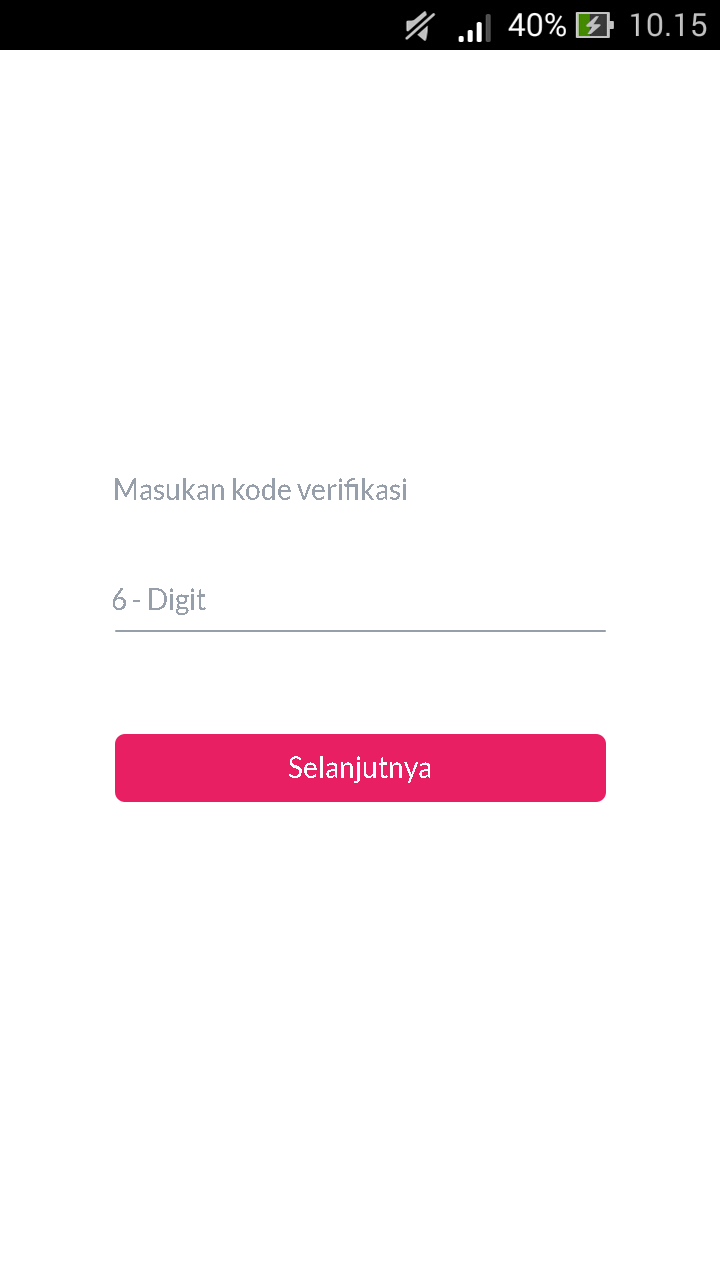
<style>
.page{position:relative;width:720px;height:1280px;background:#ffffff}
.page>*{position:absolute;margin:0}
.t1{font:29.1px "Lato-Regular";color:#969faa;scale:0.96 1}
.t2{font:29.2px "Lato-Regular";color:#969faa;scale:0.96 1}
.t3{font:29.2px "Lato-Regular";color:#ffffff;scale:0.96 1}
</style>
<div class="page">
<p class="t1" style="left:115px;top:478px;width:291px;height:22px">Masukan kode verifikasi</p>
<p class="t2" style="left:113px;top:588px;width:93px;height:27px">6 - Digit</p>
<p class="t3" style="left:289px;top:756px;width:141px;height:27px">Selanjutnya</p>
</div>
